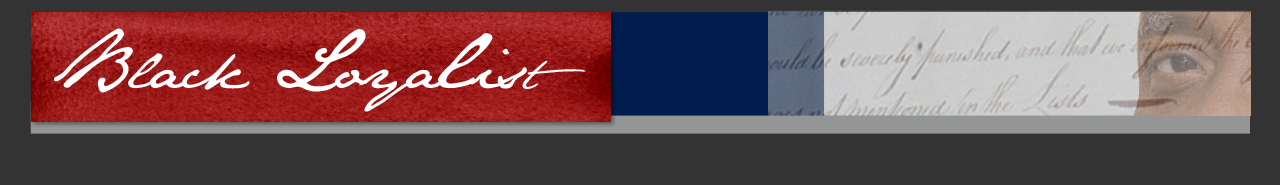
<style>
.page{position:relative;width:1280px;height:185px;background:#333333}
.page>*{position:absolute;margin:0}
.t1{font:58.8px "JaneAusten";letter-spacing:-0.02em;color:#ffffff}
.t2{font:67.6px "JaneAusten";letter-spacing:-0.02em;color:#ffffff}
.t3{font:93.1px "JaneAusten";letter-spacing:-0.02em;color:#ffffff}
.t4{font:39.2px "JaneAusten";letter-spacing:-0.02em;color:#ffffff}
</style>
<div class="page">
<p class="t1" style="left:54px;top:28px;width:532px;height:84px"><span class="t2">B</span>lack <span class="t2">L</span>oya<span class="t3">l</span>is<span class="t4">t</span></p>
</div>
